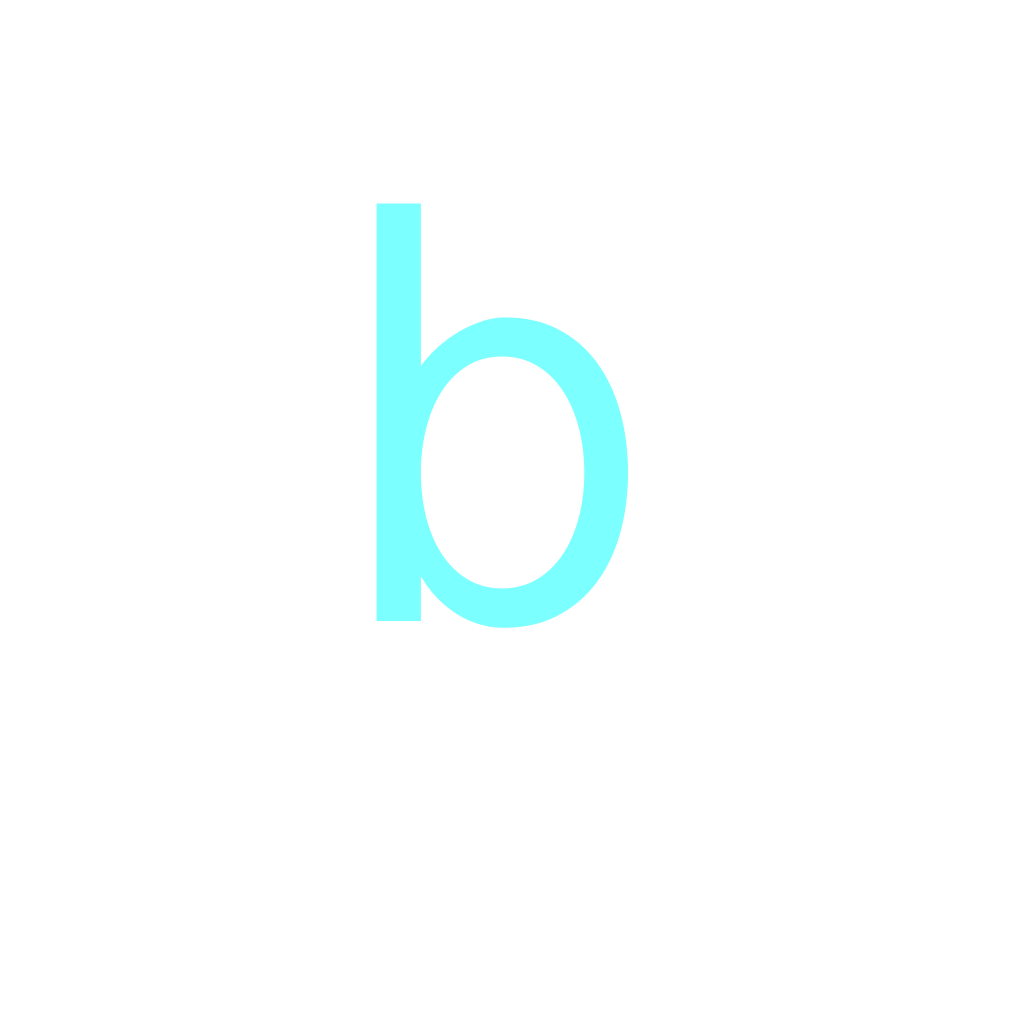
<style>
.page{position:relative;width:1024px;height:1024px;background:#ffffff}
.page>*{position:absolute;margin:0}
.t1{font:600px "KhmerSangamMN";color:#7bffff}
</style>
<div class="page">
<p class="t1" style="left:376px;top:203px;width:252px;height:425px">b</p>
</div>
